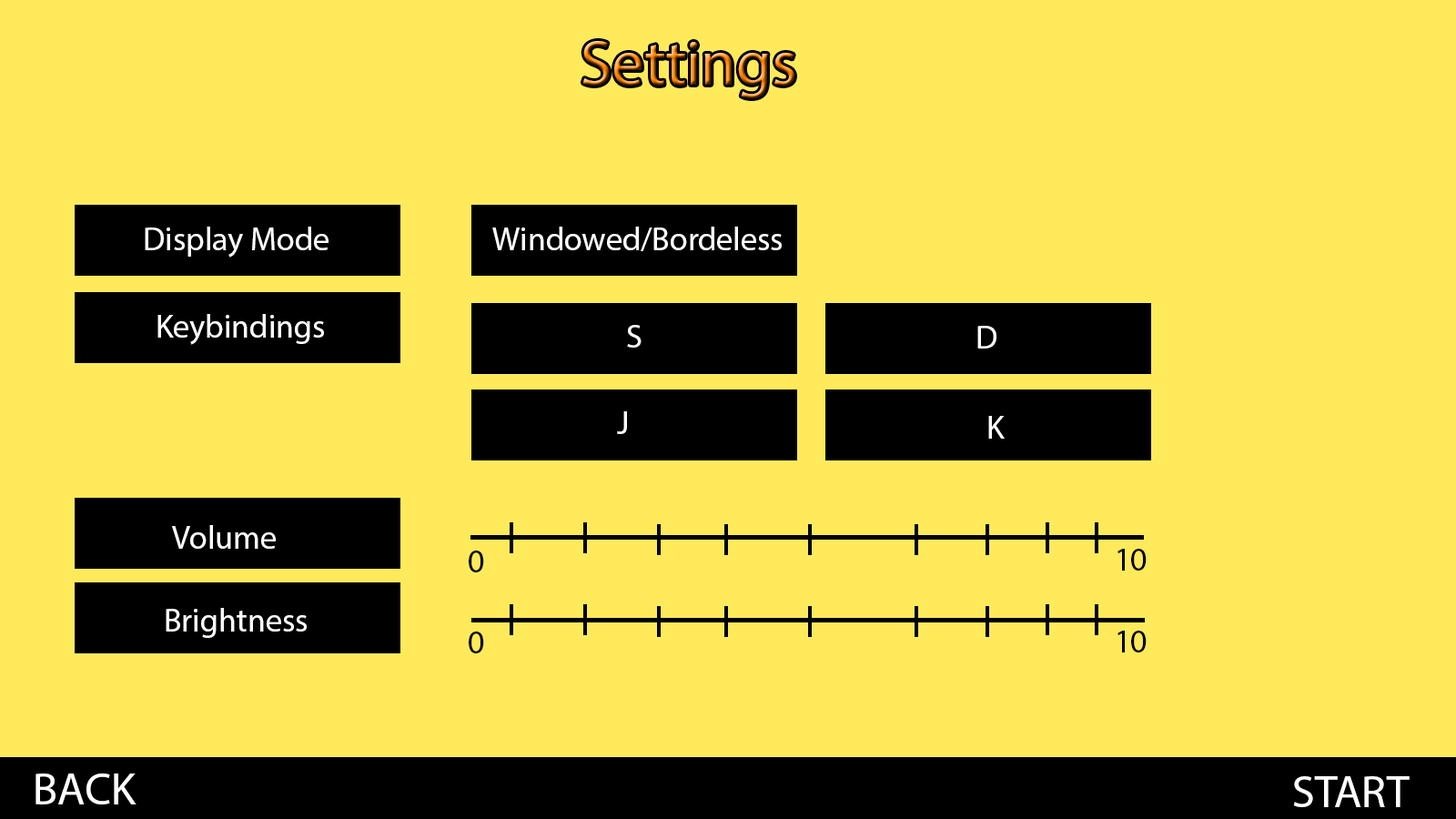
<style>
.page{position:relative;width:1456px;height:819px;background:#ffea5b}
.page>*{position:absolute;margin:0}
.t1{font:32.8px "MyriadPro-Regular";color:#ffffff}
.t2{font:32.6px "MyriadPro-Regular";color:#ffffff}
.t3{font:32.8px "MyriadPro-Regular";color:#000000}
.t4{font:32.5px "MyriadPro-Regular";color:#000000}
</style>
<div class="page">
<p class="t1" style="left:492px;top:227px;width:290px;height:24px">Windowed/Bordeless</p>
<p class="t2" style="left:627px;top:325px;width:15px;height:23px">S</p>
<p class="t1" style="left:977px;top:326px;width:19px;height:23px">D</p>
<p class="t1" style="left:617px;top:411px;width:10px;height:23px">J</p>
<p class="t1" style="left:988px;top:416px;width:17px;height:23px">K</p>
<p class="t3" style="left:469px;top:551px;width:15px;height:21px">0</p>
<p class="t3" style="left:1117px;top:549px;width:30px;height:22px">10</p>
<p class="t4" style="left:469px;top:632px;width:15px;height:21px">0</p>
<p class="t4" style="left:1117px;top:631px;width:30px;height:21px">10</p>
</div>
